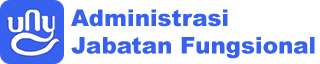
<style>
.page{position:relative;width:320px;height:64px;background:#ffffff}
.page>*{position:absolute;margin:0}
.t1{font:22.9px "Arial-Black";color:#3762f0}
</style>
<div class="page">
<p class="t1" style="left:71px;top:9px;width:244px;height:50px">Administrasi<br>Jabatan Fungsional</p>
</div>
